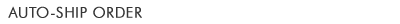
<style>
.page{position:relative;width:400px;height:24px;background:#ffffff}
.page>*{position:absolute;margin:0}
.t1{font:14.7px "FuturaBT-Light";letter-spacing:0.025em;color:#363636;text-transform:uppercase;font-weight:bold}
</style>
<div class="page">
<p class="t1" style="left:8px;top:6px;width:134px;height:12px">AUTO-SHIP ORDER</p>
</div>
